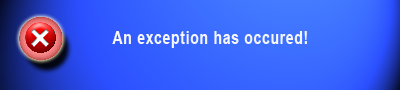
<style>
.page{position:relative;width:400px;height:90px}
.page>*{position:absolute;margin:0}
.t1{font:18.2px "Arial-BoldMT";letter-spacing:0.05em;color:#f5f6f9;scale:0.77 1}
</style>
<div class="page">
<p class="t1" style="left:112px;top:31px;width:195px;height:17px">An exception has occured!</p>
</div>
